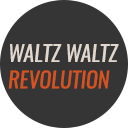
<style>
.page{position:relative;width:128px;height:128px;background:#363535}
.page>*{position:absolute;margin:0}
.t1{font:22px "Oswald-RegularItalic";color:#e1d7ce;text-transform:uppercase}
.t2{font:22px "Oswald-RegularItalic";color:#d55320;text-transform:uppercase}
</style>
<div class="page">
<p class="t1" style="left:8px;top:44px;width:111px;height:45px;text-align:justify">waltz waltz<br><span class="t2">revolution</span></p>
</div>
